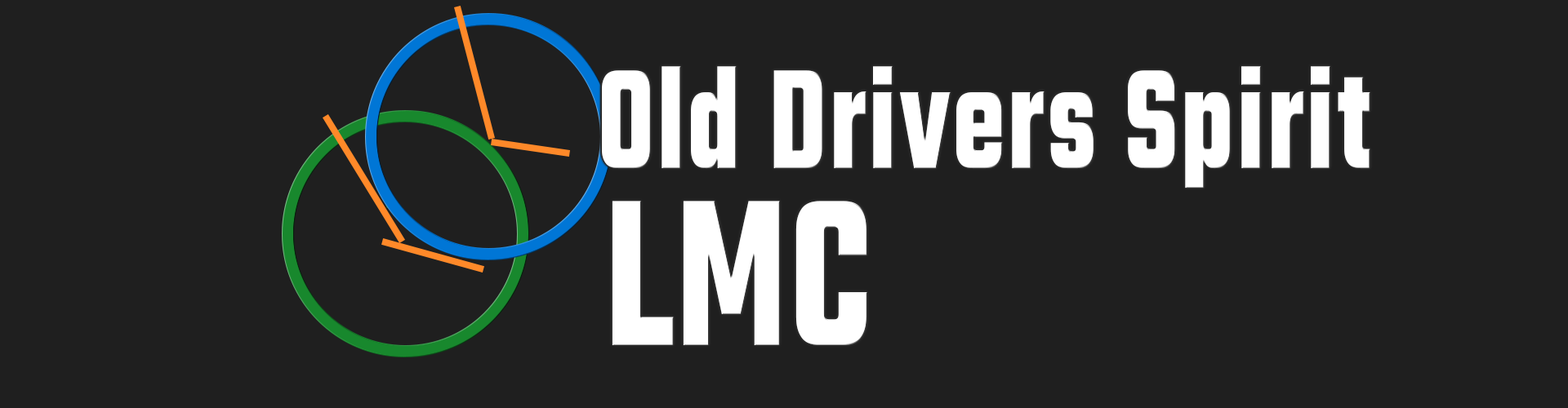
<style>
.page{position:relative;width:1568px;height:408px;background:#1f1f1f}
.page>*{position:absolute;margin:0}
.t1{font:152.1px "Teko-Bold";letter-spacing:0.025em;color:#ffffff;font-weight:bold;scale:0.73 1}
.t2{font:224.6px "Teko-Bold";letter-spacing:0.025em;color:#ffffff;font-weight:bold;scale:0.73 1}
</style>
<div class="page">
<p class="t1" style="left:602px;top:66px;width:768px;height:123px">Old Drivers Spirit</p>
<p class="t2" style="left:612px;top:201px;width:255px;height:144px">LMC</p>
</div>
